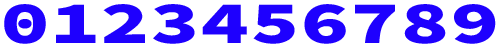
<style>
.page{position:relative;width:500px;height:50px;background:#ffffff}
.page>*{position:absolute;margin:0}
.t1{font:60.2px "SourceCodeRoman-Black";color:#1e00fe;scale:1.38 1}
</style>
<div class="page">
<p class="t1" style="left:4px;top:4px;width:492px;height:40px">0123456789</p>
</div>
